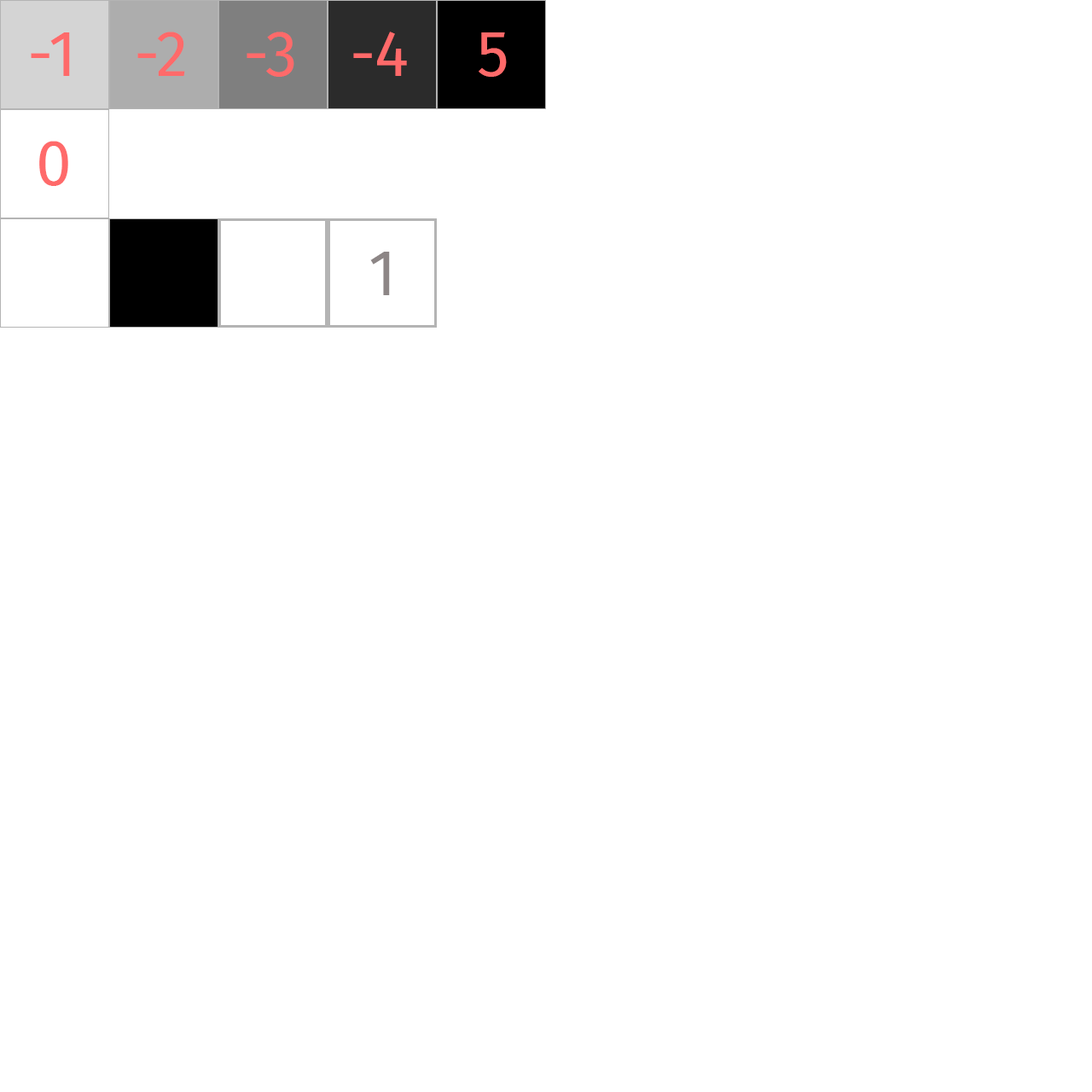
<style>
.page{position:relative;width:1092px;height:1092px;background:#ffffff}
.page>*{position:absolute;margin:0}
.t1{font:64px "FiraSans-Regular";color:#ff6a6a}
.t2{font:64px "FiraSans-Regular";color:#8d8686}
</style>
<div class="page">
<p class="t1" style="left:31px;top:32px;width:39px;height:44px">-1</p>
<p class="t1" style="left:137px;top:32px;width:48px;height:44px">-2</p>
<p class="t1" style="left:247px;top:32px;width:47px;height:45px">-3</p>
<p class="t1" style="left:353px;top:32px;width:54px;height:44px">-4</p>
<p class="t1" style="left:479px;top:32px;width:28px;height:45px">5</p>
<p class="t1" style="left:39px;top:141px;width:29px;height:45px">0</p>
<p class="t2" style="left:370px;top:252px;width:20px;height:43px">1</p>
</div>
